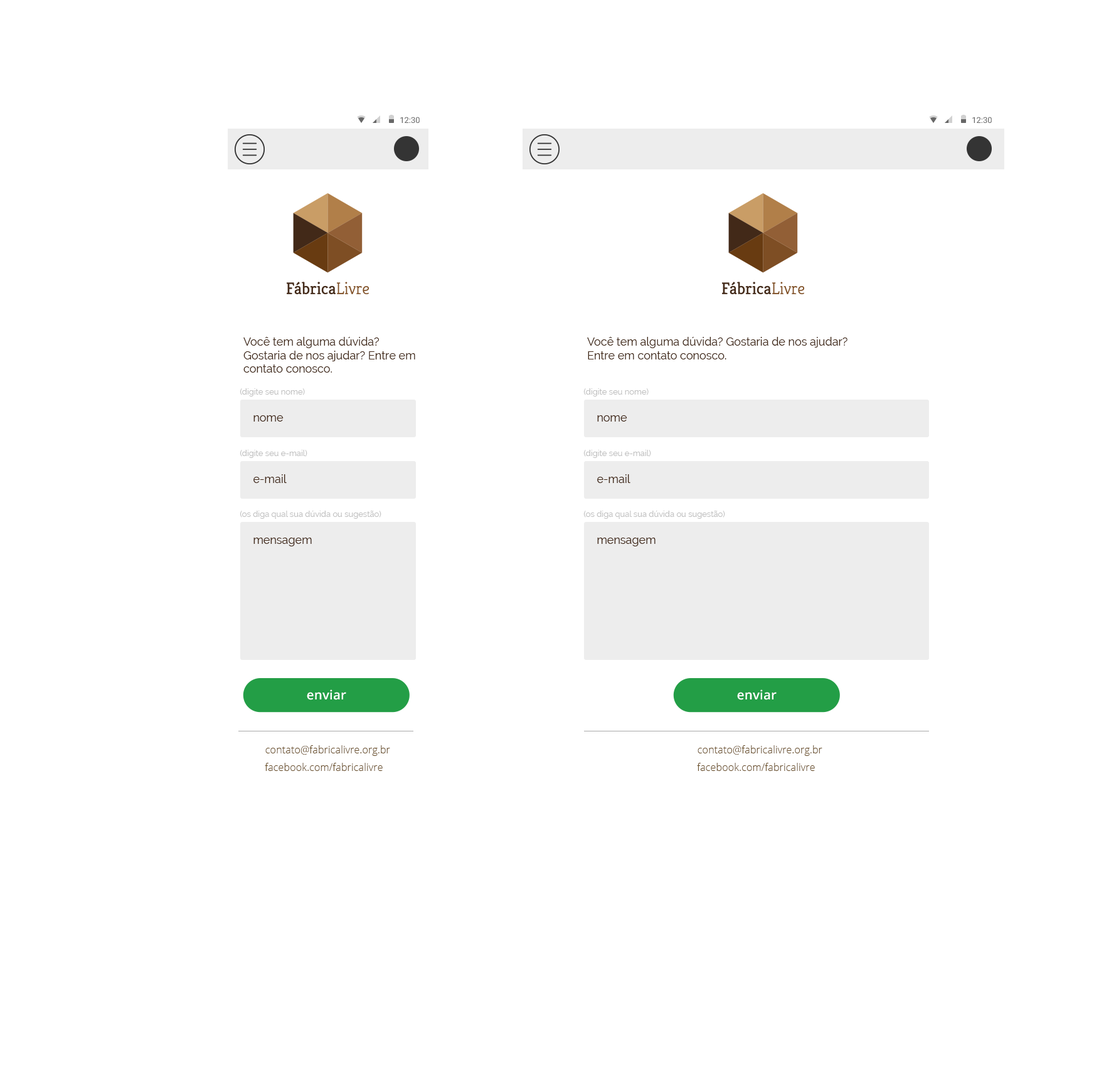
<style>
.page{position:relative;width:1094px;height:1089px;background:#ffffff}
.page>*{position:absolute;margin:0}
.t1{font:11.3px "Raleway";color:#422918}
.t2{font:8.2px "Raleway";color:#bebebe}
.t3{font:12.9px "OpenSans-Semibold";letter-spacing:0.01em;color:#ffffff}
.t4{font:10px "OpenSans-Light";letter-spacing:0.01em;color:#694e29}
</style>
<div class="page">
<p class="t1" style="left:244px;top:337px;width:171px;height:36px">Você tem alguma dúvida? Gostaria de nos ajudar? Entre em contato conosco.</p>
<p class="t1" style="left:587px;top:337px;width:261px;height:23px">Você tem alguma dúvida? Gostaria de nos ajudar? <br>Entre em contato conosco.</p>
<p class="t2" style="left:240px;top:388px;width:65px;height:9px">(digite seu nome)</p>
<p class="t2" style="left:584px;top:388px;width:65px;height:9px">(digite seu nome)</p>
<p class="t1" style="left:254px;top:415px;width:30px;height:7px">nome</p>
<p class="t1" style="left:597px;top:415px;width:31px;height:7px">nome</p>
<p class="t2" style="left:240px;top:450px;width:68px;height:8px">(digite seu e-mail)</p>
<p class="t2" style="left:584px;top:450px;width:67px;height:8px">(digite seu e-mail)</p>
<p class="t1" style="left:254px;top:474px;width:33px;height:9px">e-mail</p>
<p class="t1" style="left:597px;top:474px;width:34px;height:9px">e-mail</p>
<p class="t2" style="left:240px;top:511px;width:142px;height:8px">(os diga qual sua dúvida ou sugestão)</p>
<p class="t2" style="left:584px;top:511px;width:141px;height:8px">(os diga qual sua dúvida ou sugestão)</p>
<p class="t1" style="left:254px;top:538px;width:58px;height:9px">mensagem</p>
<p class="t1" style="left:597px;top:538px;width:59px;height:9px">mensagem</p>
<p class="t3" style="left:307px;top:690px;width:39px;height:10px">enviar</p>
<p class="t3" style="left:737px;top:690px;width:40px;height:10px">enviar</p>
<p class="t4" style="left:265px;top:746px;width:125px;height:10px">contato@fabricalivre.org.br</p>
<p class="t4" style="left:698px;top:746px;width:125px;height:10px">contato@fabricalivre.org.br</p>
<p class="t4" style="left:265px;top:763px;width:118px;height:8px">facebook.com/fabricalivre</p>
<p class="t4" style="left:697px;top:763px;width:118px;height:8px">facebook.com/fabricalivre</p>
</div>
